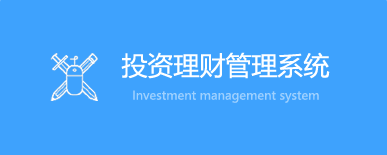
<style>
.page{position:relative;width:387px;height:155px;background:#3ea2fd}
.page>*{position:absolute;margin:0}
.t1{font:26px "MicrosoftYaHei";color:#ffffff}
.t2{font:12px "MicrosoftYaHei";color:#9ed1fe}
</style>
<div class="page">
<p class="t1" style="left:121px;top:52px;width:209px;height:27px">投资理财管理系统</p>
<p class="t2" style="left:133px;top:90px;width:186px;height:13px">Investment management system</p>
</div>
